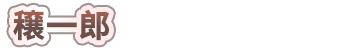
<style>
.page{position:relative;width:360px;height:50px;background:#ffffff}
.page>*{position:absolute;margin:0}
.t1{font:32px "SourceHanSansSC-Bold";color:#73534d;font-weight:bold}
</style>
<div class="page">
<p class="t1" style="left:13px;top:9px;width:96px;height:32px">穣一郎</p>
</div>
